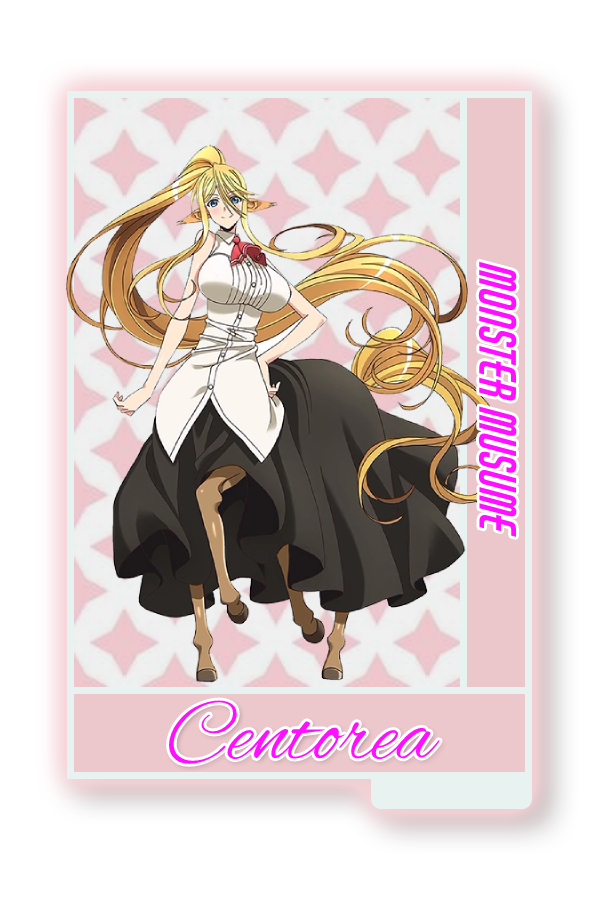
<style>
.page{position:relative;width:600px;height:900px;background:#ffffff}
.page>*{position:absolute;margin:0}
.t1{font:48.8px "AirAmerica-Regular";color:#ff0fff}
.t2{font:88.3px "AlexBrush-Regular";color:#ff0fff}
</style>
<div class="page">
<p class="t1" style="left:478px;top:261px;width:39px;height:276px;rotate:90deg">Monster Musume</p>
<p class="t2" style="left:169px;top:700px;width:271px;height:64px">Centorea</p>
</div>
